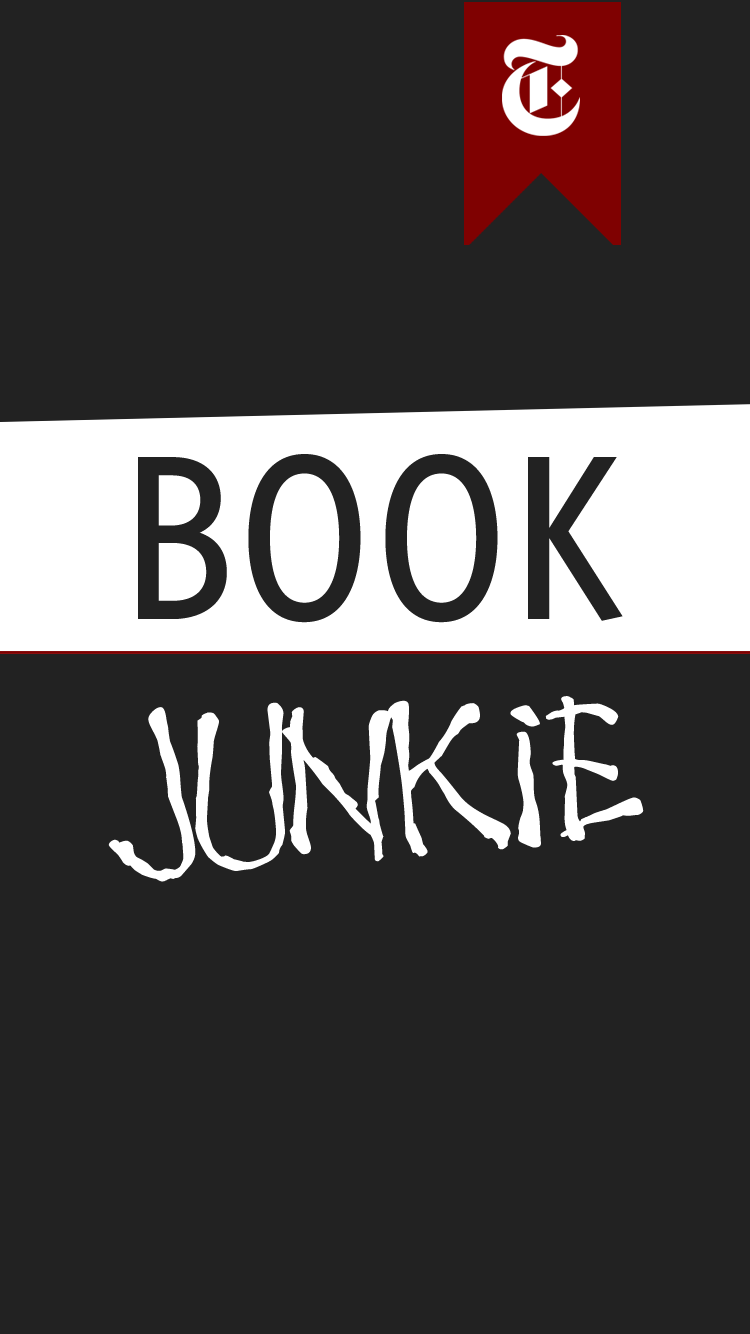
<style>
.page{position:relative;width:750px;height:1334px;background:#222222}
.page>*{position:absolute;margin:0}
.t1{font:234.5px "WhitneyCondensed-Medium";letter-spacing:0.04em;color:#222222}
.t2{font:243.1px "WakingtheWitch";letter-spacing:0.011em;color:#ffffff}
</style>
<div class="page">
<p class="t1" style="left:138px;top:454px;width:485px;height:169px">BOOK</p>
<p class="t2" style="left:108px;top:696px;width:536px;height:186px;rotate:-3deg">JUNKIE</p>
</div>
